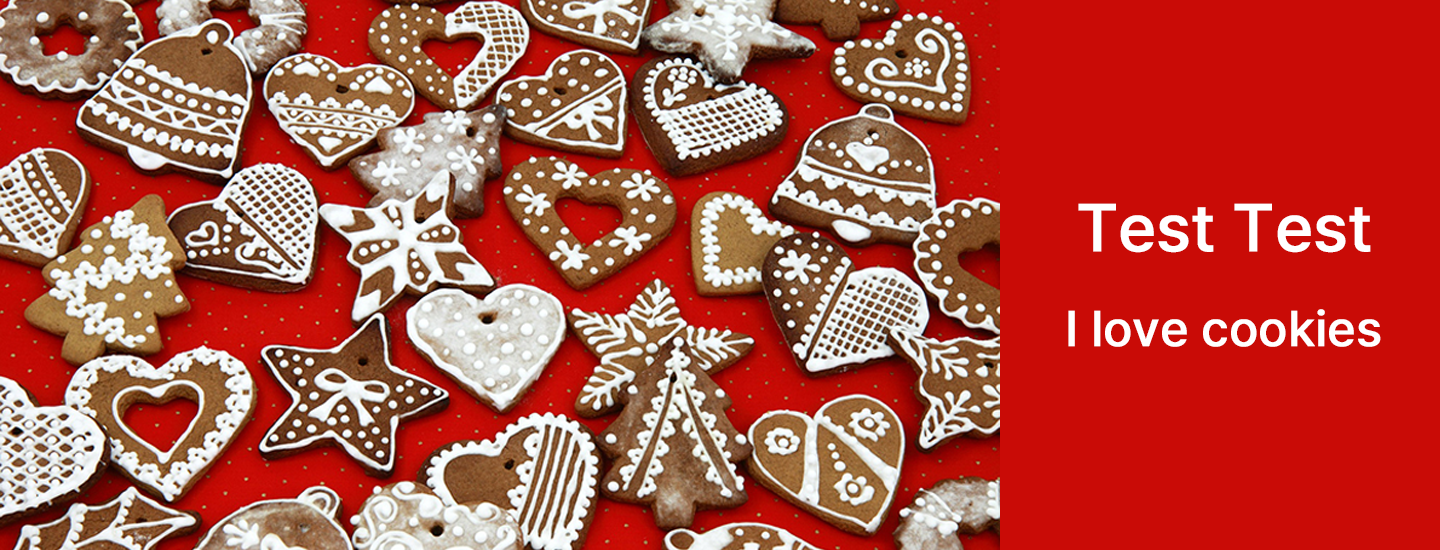
<style>
.page{position:relative;width:1440px;height:550px;background:#c90b06}
.page>*{position:absolute;margin:0}
.t1{font:66.7px "Pretendard-Medium";color:#ffffff;font-weight:bold}
.t2{font:50px "Pretendard-Medium";color:#ffffff;font-weight:bold}
</style>
<div class="page">
<p class="t1" style="left:1078px;top:203px;width:293px;height:50px">Test Test</p>
<p class="t2" style="left:1068px;top:309px;width:313px;height:38px">I love cookies</p>
</div>
